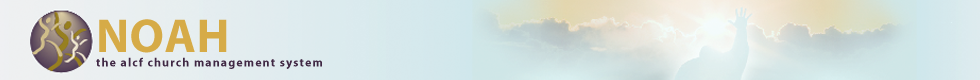
<style>
.page{position:relative;width:980px;height:80px}
.page>*{position:absolute;margin:0}
.t1{font:12px "MyriadPro-Bold";letter-spacing:0.09em;color:#402844}
.t2{font:48px "MyriadPro-Bold";letter-spacing:0.01em;color:#d6ab47}
</style>
<div class="page">
<p class="t1" style="left:96px;top:19px;width:226px;height:50px"><span class="t2">NOAH<br></span>the alcf church management system</p>
</div>
